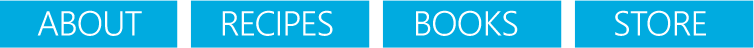
<style>
.page{position:relative;width:754px;height:48px;background:#00abe0}
.page>*{position:absolute;margin:0}
.t1{font:34.7px "SegoeWP-SemiLight";letter-spacing:-0.01em;color:#ffffff}
</style>
<div class="page">
<p class="t1" style="left:37px;top:10px;width:105px;height:26px">ABOUT</p>
<p class="t1" style="left:222px;top:10px;width:111px;height:26px">RECIPES</p>
<p class="t1" style="left:416px;top:10px;width:102px;height:26px">BOOKS</p>
<p class="t1" style="left:615px;top:10px;width:91px;height:26px">STORE</p>
</div>
